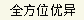
<style>
.page{position:relative;width:84px;height:20px;background:#f8f8e8}
.page>*{position:absolute;margin:0}
.t1{font:13.3px "Sarasa-Gothic-SC-Regular";color:#0a0a0a}
</style>
<div class="page">
<p class="t1" style="left:10px;top:4px;width:65px;height:12px">全方位优异</p>
</div>
